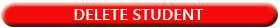
<style>
.page{position:relative;width:280px;height:28px;background:#f60b0b}
.page>*{position:absolute;margin:0}
.t1{font:16.4px "YuGothicUI-Bold";color:#ffffff}
</style>
<div class="page">
<p class="t1" style="left:74px;top:9px;width:130px;height:11px">DELETE STUDENT</p>
</div>
